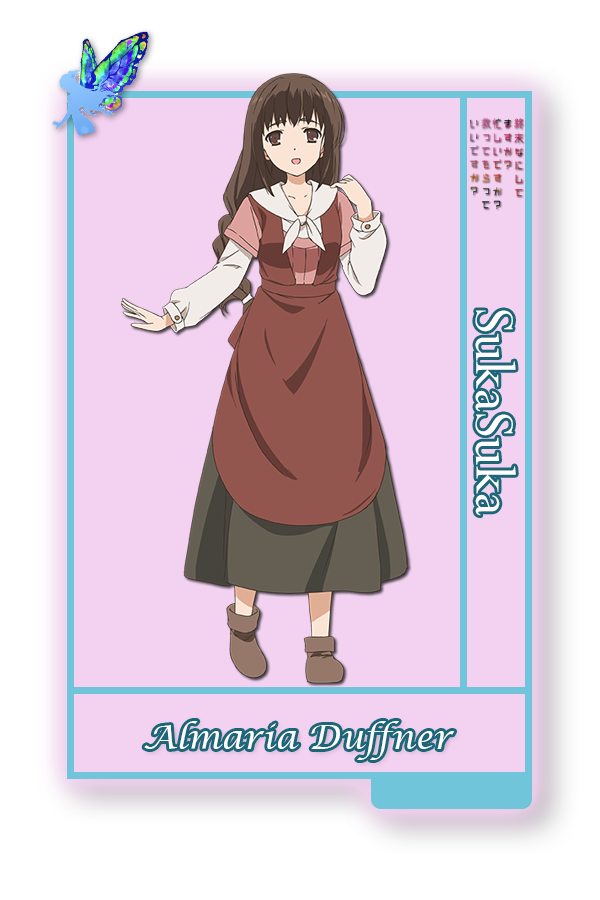
<style>
.page{position:relative;width:600px;height:900px;background:#f3d2f1}
.page>*{position:absolute;margin:0}
.t1{font:62.5px "Perpetua";color:#ffffff}
.t2{font:33.3px "LucidaCalligraphy-Italic";color:#ffffff}
</style>
<div class="page">
<p class="t1" style="left:475px;top:310px;width:41px;height:206px;rotate:90deg">SukaSuka</p>
<p class="t2" style="left:144px;top:721px;width:311px;height:39px">Almaria Duffner</p>
</div>
